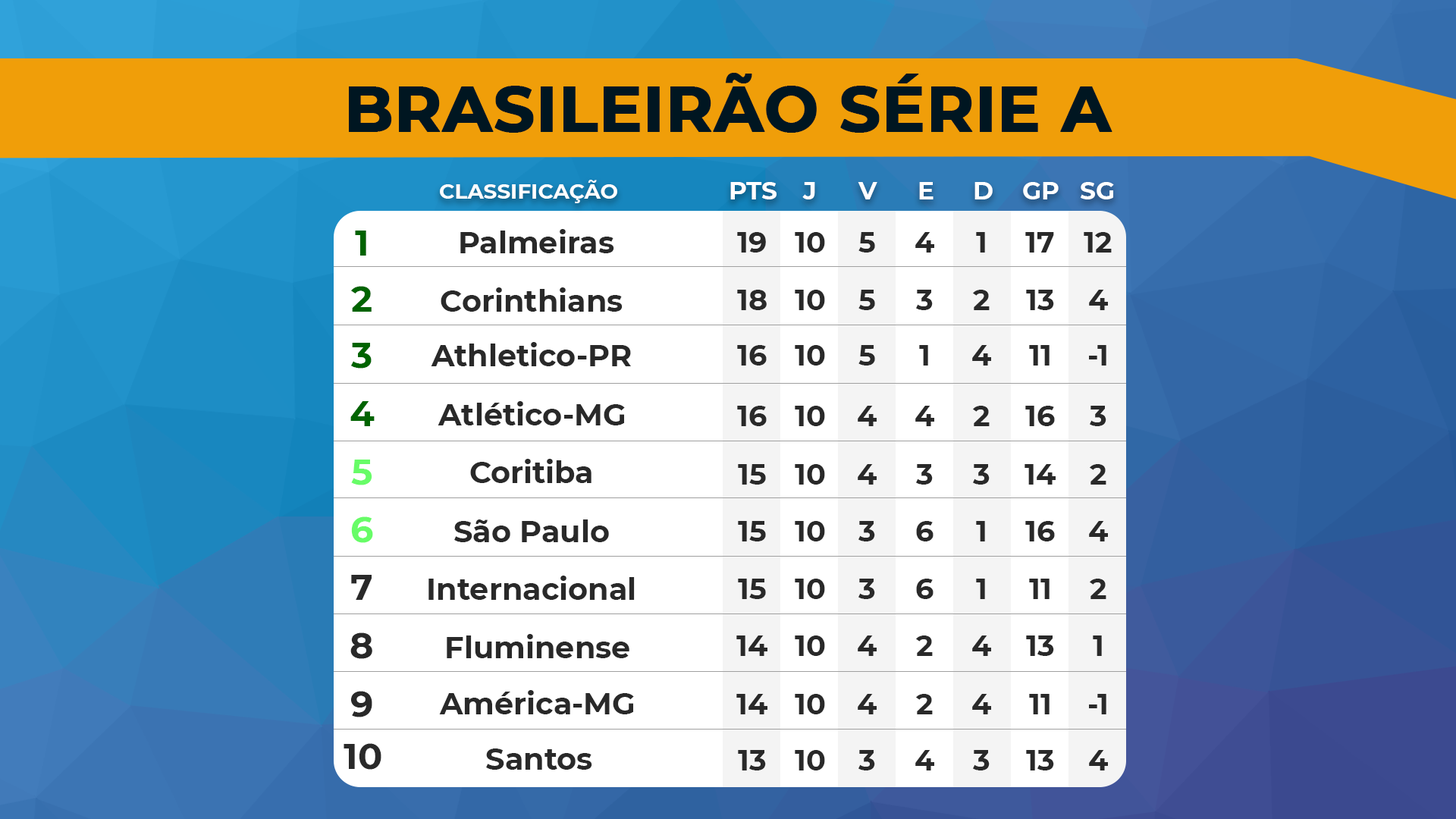
<style>
.page{position:relative;width:1456px;height:819px;background:#ffffff}
.page>*{position:absolute;margin:0}
.t1{font:63.7px "Montserrat-Bold";color:#001621;text-transform:uppercase;font-weight:bold}
.t2{font:21.1px "Montserrat-Bold";color:#ffffff}
.t3{font:24.8px "Montserrat-Bold";color:#ffffff}
.t4{font:36.2px "Montserrat-Bold";color:#006300}
.t5{font:30.1px "Montserrat-Bold";color:#292929}
.t6{font:28.9px "Montserrat-Bold";color:#292929}
.t7{font:36.2px "Montserrat-Bold";color:#006400}
.t8{font:36.2px "Montserrat-Bold";color:#67fc67}
.t9{font:36.2px "Montserrat-Bold";color:#292929}
</style>
<div class="page">
<p class="t1" style="left:349px;top:73px;width:763px;height:60px">BRASILEIRÃO SÉRIE A</p>
<p class="t2" style="left:440px;top:180px;width:177px;height:23px">CLASSIFICAÇÃO</p>
<p class="t3" style="left:730px;top:182px;width:47px;height:17px">PTS</p>
<p class="t3" style="left:802px;top:182px;width:13px;height:17px">J</p>
<p class="t3" style="left:858px;top:182px;width:19px;height:17px">V</p>
<p class="t3" style="left:919px;top:182px;width:14px;height:17px">E</p>
<p class="t3" style="left:974px;top:182px;width:19px;height:17px">D</p>
<p class="t3" style="left:1023px;top:182px;width:36px;height:17px">GP</p>
<p class="t3" style="left:1080px;top:182px;width:34px;height:17px">SG</p>
<p class="t4" style="left:355px;top:231px;width:11px;height:25px">1</p>
<p class="t5" style="left:460px;top:229px;width:154px;height:24px">Palmeiras</p>
<p class="t6" style="left:737px;top:232px;width:29px;height:21px">19</p>
<p class="t6" style="left:795px;top:232px;width:30px;height:21px">10</p>
<p class="t6" style="left:858px;top:232px;width:17px;height:21px">5</p>
<p class="t6" style="left:915px;top:232px;width:19px;height:21px">4</p>
<p class="t6" style="left:976px;top:232px;width:9px;height:21px">1</p>
<p class="t6" style="left:1025px;top:232px;width:29px;height:21px">17</p>
<p class="t6" style="left:1084px;top:232px;width:28px;height:21px">12</p>
<p class="t7" style="left:351px;top:286px;width:21px;height:26px">2</p>
<p class="t5" style="left:441px;top:287px;width:182px;height:25px">Corinthians</p>
<p class="t6" style="left:737px;top:290px;width:30px;height:20px">18</p>
<p class="t6" style="left:795px;top:290px;width:30px;height:20px">10</p>
<p class="t6" style="left:858px;top:290px;width:17px;height:20px">5</p>
<p class="t6" style="left:916px;top:290px;width:17px;height:20px">3</p>
<p class="t6" style="left:973px;top:290px;width:17px;height:20px">2</p>
<p class="t6" style="left:1026px;top:290px;width:28px;height:20px">13</p>
<p class="t6" style="left:1089px;top:290px;width:19px;height:20px">4</p>
<p class="t7" style="left:351px;top:343px;width:21px;height:26px">3</p>
<p class="t5" style="left:431px;top:342px;width:200px;height:24px">Athletico-PR</p>
<p class="t6" style="left:737px;top:345px;width:30px;height:21px">16</p>
<p class="t6" style="left:795px;top:345px;width:30px;height:21px">10</p>
<p class="t6" style="left:858px;top:345px;width:17px;height:21px">5</p>
<p class="t6" style="left:919px;top:345px;width:9px;height:21px">1</p>
<p class="t6" style="left:972px;top:345px;width:19px;height:21px">4</p>
<p class="t6" style="left:1029px;top:345px;width:21px;height:21px">11</p>
<p class="t6" style="left:1089px;top:345px;width:17px;height:21px">-1</p>
<p class="t7" style="left:350px;top:401px;width:25px;height:25px">4</p>
<p class="t5" style="left:438px;top:401px;width:187px;height:24px">Atlético-MG</p>
<p class="t6" style="left:737px;top:406px;width:30px;height:20px">16</p>
<p class="t6" style="left:795px;top:406px;width:30px;height:20px">10</p>
<p class="t6" style="left:858px;top:406px;width:19px;height:20px">4</p>
<p class="t6" style="left:915px;top:406px;width:19px;height:20px">4</p>
<p class="t6" style="left:973px;top:406px;width:17px;height:20px">2</p>
<p class="t6" style="left:1025px;top:406px;width:30px;height:20px">16</p>
<p class="t6" style="left:1090px;top:406px;width:16px;height:20px">3</p>
<p class="t8" style="left:351px;top:460px;width:21px;height:25px">5</p>
<p class="t5" style="left:470px;top:459px;width:121px;height:24px">Coritiba</p>
<p class="t6" style="left:738px;top:464px;width:28px;height:21px">15</p>
<p class="t6" style="left:795px;top:464px;width:30px;height:21px">10</p>
<p class="t6" style="left:858px;top:464px;width:19px;height:21px">4</p>
<p class="t6" style="left:916px;top:464px;width:17px;height:21px">3</p>
<p class="t6" style="left:973px;top:464px;width:17px;height:21px">3</p>
<p class="t6" style="left:1024px;top:464px;width:32px;height:21px">14</p>
<p class="t6" style="left:1090px;top:464px;width:16px;height:21px">2</p>
<p class="t8" style="left:351px;top:516px;width:22px;height:27px">6</p>
<p class="t5" style="left:454px;top:519px;width:155px;height:23px">São Paulo</p>
<p class="t6" style="left:738px;top:521px;width:28px;height:20px">15</p>
<p class="t6" style="left:795px;top:521px;width:30px;height:20px">10</p>
<p class="t6" style="left:858px;top:521px;width:17px;height:20px">3</p>
<p class="t6" style="left:916px;top:521px;width:17px;height:20px">6</p>
<p class="t6" style="left:976px;top:521px;width:9px;height:20px">1</p>
<p class="t6" style="left:1025px;top:521px;width:30px;height:20px">16</p>
<p class="t6" style="left:1089px;top:521px;width:19px;height:20px">4</p>
<p class="t9" style="left:351px;top:575px;width:21px;height:25px">7</p>
<p class="t5" style="left:428px;top:576px;width:207px;height:24px">Internacional</p>
<p class="t6" style="left:738px;top:579px;width:28px;height:20px">15</p>
<p class="t6" style="left:795px;top:579px;width:30px;height:20px">10</p>
<p class="t6" style="left:858px;top:579px;width:17px;height:20px">3</p>
<p class="t6" style="left:916px;top:579px;width:17px;height:20px">6</p>
<p class="t6" style="left:976px;top:579px;width:9px;height:20px">1</p>
<p class="t6" style="left:1029px;top:579px;width:21px;height:20px">11</p>
<p class="t6" style="left:1090px;top:579px;width:16px;height:20px">2</p>
<p class="t9" style="left:350px;top:632px;width:22px;height:27px">8</p>
<p class="t5" style="left:447px;top:634px;width:182px;height:24px">Fluminense</p>
<p class="t6" style="left:736px;top:635px;width:31px;height:21px">14</p>
<p class="t6" style="left:795px;top:635px;width:30px;height:21px">10</p>
<p class="t6" style="left:858px;top:635px;width:19px;height:21px">4</p>
<p class="t6" style="left:916px;top:635px;width:17px;height:21px">2</p>
<p class="t6" style="left:972px;top:635px;width:19px;height:21px">4</p>
<p class="t6" style="left:1026px;top:635px;width:28px;height:21px">13</p>
<p class="t6" style="left:1093px;top:635px;width:9px;height:21px">1</p>
<p class="t9" style="left:351px;top:691px;width:21px;height:26px">9</p>
<p class="t5" style="left:439px;top:690px;width:195px;height:24px">América-MG</p>
<p class="t6" style="left:736px;top:694px;width:31px;height:20px">14</p>
<p class="t6" style="left:795px;top:694px;width:30px;height:20px">10</p>
<p class="t6" style="left:858px;top:694px;width:19px;height:20px">4</p>
<p class="t6" style="left:916px;top:694px;width:17px;height:20px">2</p>
<p class="t6" style="left:972px;top:694px;width:19px;height:20px">4</p>
<p class="t6" style="left:1029px;top:694px;width:21px;height:20px">11</p>
<p class="t6" style="left:1089px;top:694px;width:17px;height:20px">-1</p>
<p class="t9" style="left:344px;top:743px;width:37px;height:27px">10</p>
<p class="t5" style="left:486px;top:748px;width:106px;height:22px">Santos</p>
<p class="t6" style="left:738px;top:750px;width:28px;height:20px">13</p>
<p class="t6" style="left:795px;top:750px;width:30px;height:20px">10</p>
<p class="t6" style="left:858px;top:750px;width:17px;height:20px">3</p>
<p class="t6" style="left:915px;top:750px;width:19px;height:20px">4</p>
<p class="t6" style="left:973px;top:750px;width:17px;height:20px">3</p>
<p class="t6" style="left:1026px;top:750px;width:28px;height:20px">13</p>
<p class="t6" style="left:1089px;top:750px;width:19px;height:20px">4</p>
</div>
